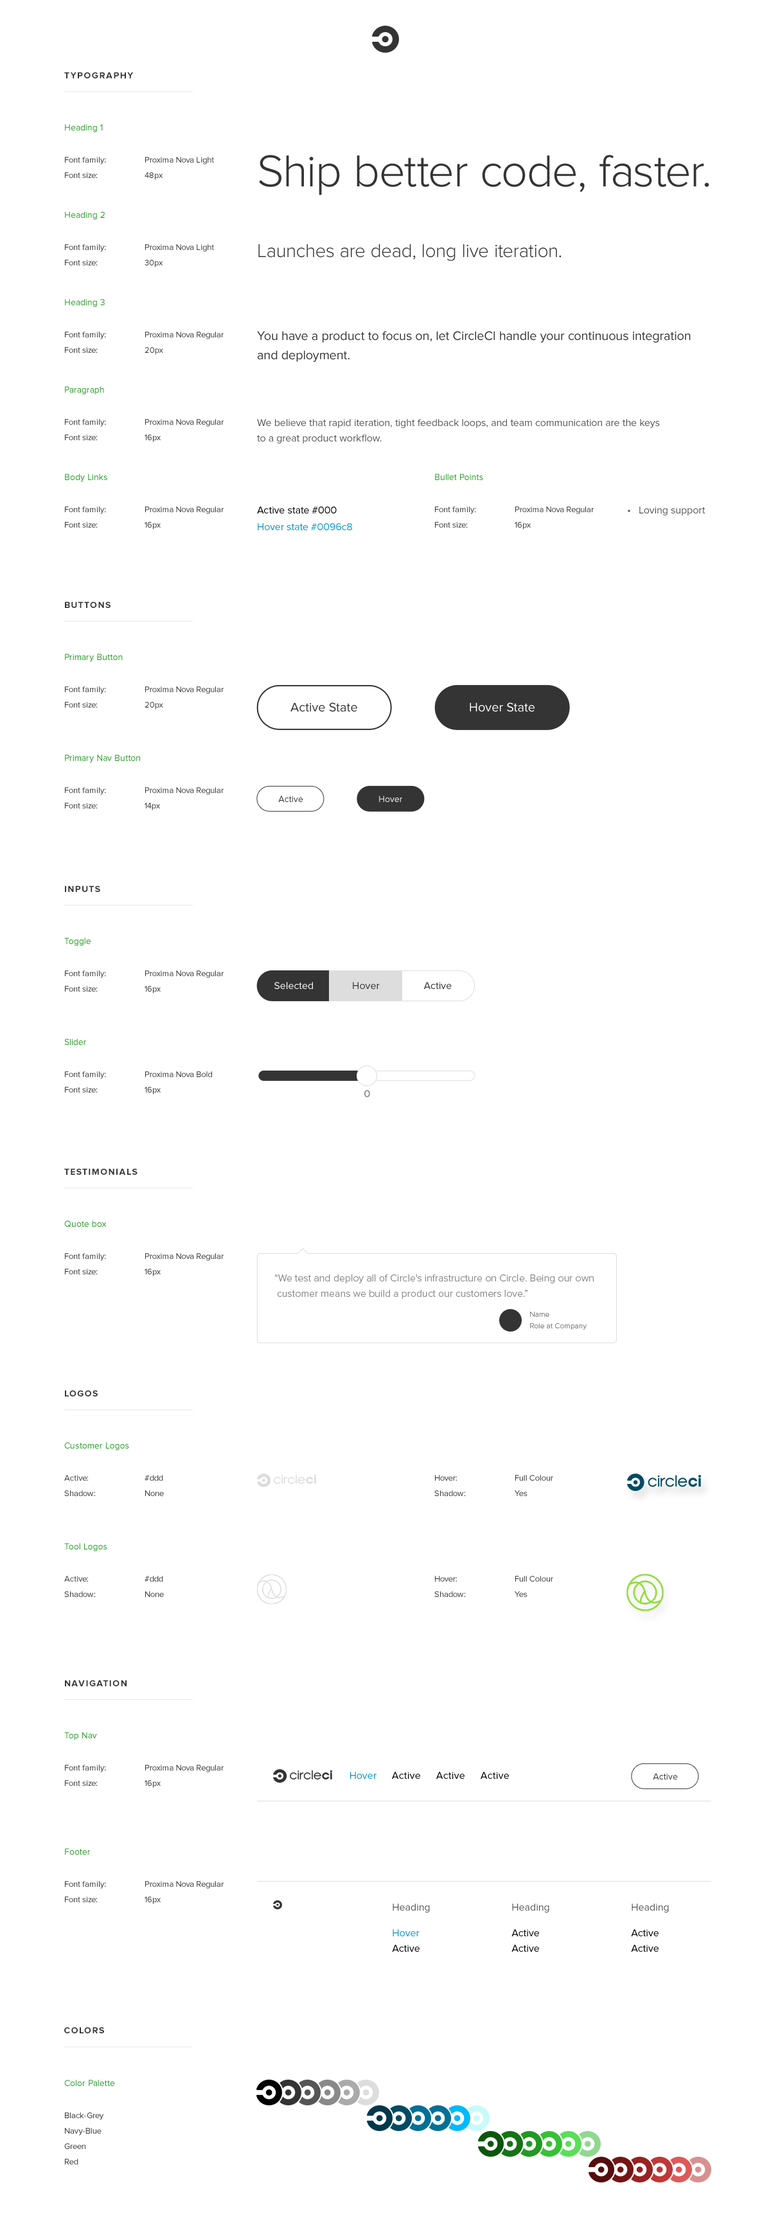
<style>
.page{position:relative;width:771px;height:2239px;background:#ffffff}
.page>*{position:absolute;margin:0}
.t1{font:9px "ProximaNova-Bold";letter-spacing:0.1em;color:#343434;text-transform:uppercase}
.t2{font:9px "ProximaNova-Regular";color:#229922}
.t3{font:8.4px/12.9px "ProximaNova-Regular";color:#343434}
.t4{font:8.4px/12.9px "ProximaNova-Regular";color:#333333}
.t5{font:46.3px "ProximaNova-Light";color:#343434}
.t6{font:19.3px "ProximaNova-Light";color:#343434}
.t7{font:12.9px/19.3px "ProximaNova-Regular";color:#343434}
.t8{font:10.3px/15.4px "ProximaNova-Regular";color:#555555}
.t9{font:10.3px/15.4px "ProximaNova-Regular";color:#0096c8}
.t10{font:10.3px/15.4px "ProximaNova-Regular";color:#000000}
.t11{font:10.3px "ProximaNova-Regular";color:#555555}
.t12{font:12.9px "ProximaNova-Regular";color:#343434}
.t13{font:12.9px "ProximaNova-Regular";color:#ffffff}
.t14{font:9px "ProximaNova-Regular";color:#343434}
.t15{font:9px "ProximaNova-Regular";color:#ffffff}
.t16{font:10.3px "ProximaNova-Regular";color:#ffffff}
.t17{font:10.3px "ProximaNova-Regular";color:#343434}
.t18{font:10.3px "ProximaNova-Regular";color:#898989;font-weight:bold}
.t19{font:10.3px/15.4px "ProximaNova-Light";color:#898989}
.t20{font:7.7px/11.6px "ProximaNova-Light";color:#898989}
.t21{font:10.3px "ProximaNova-Regular";color:#000000}
.t22{font:10.3px "ProximaNova-Regular";color:#0096c8}
.t23{font:10.3px/25.7px "ProximaNova-Regular";color:#0096c8}
.t24{font:10.3px/25.7px "ProximaNova-Regular";color:#000000}
</style>
<div class="page">
<p class="t1" style="left:64px;top:72px;width:70px;height:6px">Typography</p>
<p class="t2" style="left:65px;top:124px;width:38px;height:8px">Heading 1</p>
<p class="t3" style="left:65px;top:157px;width:41px;height:21px">Font family:<br>Font size:</p>
<p class="t4" style="left:145px;top:157px;width:69px;height:23px">Proxima Nova Light<br>48px</p>
<p class="t5" style="left:259px;top:155px;width:451px;height:40px">Ship better code, faster.</p>
<p class="t2" style="left:65px;top:211px;width:40px;height:9px">Heading 2</p>
<p class="t4" style="left:65px;top:244px;width:41px;height:21px">Font family:<br>Font size:</p>
<p class="t4" style="left:145px;top:244px;width:69px;height:23px">Proxima Nova Light<br>30px</p>
<p class="t6" style="left:258px;top:244px;width:304px;height:17px">Launches are dead, long live iteration.</p>
<p class="t2" style="left:65px;top:299px;width:40px;height:8px">Heading 3</p>
<p class="t4" style="left:65px;top:332px;width:41px;height:21px">Font family:<br>Font size:</p>
<p class="t4" style="left:145px;top:332px;width:79px;height:23px">Proxima Nova Regular<br>20px</p>
<p class="t7" style="left:257px;top:331px;width:434px;height:31px">You have a product to focus on, let CircleCI handle your continuous integration and deployment.</p>
<p class="t2" style="left:65px;top:386px;width:39px;height:9px">Paragraph</p>
<p class="t4" style="left:65px;top:419px;width:41px;height:21px">Font family:<br>Font size:</p>
<p class="t4" style="left:145px;top:419px;width:79px;height:23px">Proxima Nova Regular<br>16px</p>
<p class="t8" style="left:257px;top:419px;width:403px;height:25px">We believe that rapid iteration, tight feedback loops, and team communication are the keys to a great product workflow.</p>
<p class="t2" style="left:65px;top:474px;width:42px;height:8px">Body Links</p>
<p class="t2" style="left:435px;top:474px;width:48px;height:6px">Bullet Points</p>
<p class="t4" style="left:65px;top:506px;width:41px;height:22px">Font family:<br>Font size:</p>
<p class="t4" style="left:145px;top:506px;width:79px;height:24px">Proxima Nova Regular<br>16px</p>
<p class="t9" style="left:257px;top:506px;width:95px;height:24px"><span class="t10">Active state #000<br></span>Hover state #0096c8</p>
<p class="t4" style="left:435px;top:506px;width:41px;height:22px">Font family:<br>Font size:</p>
<p class="t4" style="left:515px;top:506px;width:79px;height:24px">Proxima Nova Regular<br>16px</p>
<p class="t11" style="left:628px;top:506px;width:78px;height:9px">• Loving support</p>
<p class="t1" style="left:65px;top:602px;width:46px;height:6px">Buttons</p>
<p class="t2" style="left:65px;top:654px;width:58px;height:8px">Primary Button</p>
<p class="t3" style="left:65px;top:686px;width:41px;height:22px">Font family:<br>Font size:</p>
<p class="t4" style="left:145px;top:686px;width:79px;height:24px">Proxima Nova Regular<br>20px</p>
<p class="t12" style="left:291px;top:703px;width:66px;height:9px">Active State</p>
<p class="t13" style="left:470px;top:703px;width:65px;height:9px">Hover State</p>
<p class="t2" style="left:65px;top:755px;width:75px;height:8px">Primary Nav Button</p>
<p class="t3" style="left:65px;top:787px;width:41px;height:22px">Font family:<br>Font size:</p>
<p class="t4" style="left:145px;top:787px;width:79px;height:24px">Proxima Nova Regular<br>14px</p>
<p class="t14" style="left:278px;top:796px;width:25px;height:6px">Active</p>
<p class="t15" style="left:379px;top:796px;width:23px;height:6px">Hover</p>
<p class="t1" style="left:65px;top:886px;width:35px;height:6px">Inputs</p>
<p class="t2" style="left:64px;top:938px;width:27px;height:8px">Toggle</p>
<p class="t3" style="left:65px;top:971px;width:41px;height:21px">Font family:<br>Font size:</p>
<p class="t4" style="left:145px;top:971px;width:79px;height:23px">Proxima Nova Regular<br>16px</p>
<p class="t16" style="left:274px;top:982px;width:39px;height:7px">Selected</p>
<p class="t17" style="left:353px;top:982px;width:27px;height:7px">Hover</p>
<p class="t17" style="left:424px;top:982px;width:28px;height:7px">Active</p>
<p class="t2" style="left:64px;top:1039px;width:22px;height:6px">Slider</p>
<p class="t3" style="left:65px;top:1071px;width:41px;height:22px">Font family:<br>Font size:</p>
<p class="t4" style="left:145px;top:1071px;width:67px;height:24px">Proxima Nova Bold<br>16px</p>
<p class="t18" style="left:364px;top:1090px;width:6px;height:8px">0</p>
<p class="t1" style="left:64px;top:1169px;width:74px;height:6px">Testimonials</p>
<p class="t2" style="left:64px;top:1221px;width:43px;height:7px">Quote box</p>
<p class="t3" style="left:65px;top:1253px;width:41px;height:22px">Font family:<br>Font size:</p>
<p class="t4" style="left:145px;top:1253px;width:79px;height:24px">Proxima Nova Regular<br>16px</p>
<p class="t19" style="left:275px;top:1275px;width:319px;height:24px">“We test and deploy all of Circle's infrastructure on Circle. Being our own<br> customer means we build a product our customers love.”</p>
<p class="t20" style="left:530px;top:1312px;width:57px;height:18px">Name<br>Role at Company</p>
<p class="t1" style="left:65px;top:1390px;width:33px;height:7px">Logos</p>
<p class="t2" style="left:64px;top:1442px;width:65px;height:9px">Customer Logos</p>
<p class="t3" style="left:64px;top:1475px;width:32px;height:21px">Active:<br>Shadow:</p>
<p class="t4" style="left:145px;top:1475px;width:19px;height:21px">#ddd<br>None</p>
<p class="t3" style="left:435px;top:1475px;width:31px;height:21px">Hover:<br>Shadow:</p>
<p class="t4" style="left:515px;top:1475px;width:38px;height:21px">Full Colour<br>Yes</p>
<p class="t2" style="left:64px;top:1543px;width:43px;height:9px">Tool Logos</p>
<p class="t3" style="left:64px;top:1576px;width:32px;height:21px">Active:<br>Shadow:</p>
<p class="t4" style="left:145px;top:1576px;width:19px;height:21px">#ddd<br>None</p>
<p class="t3" style="left:435px;top:1576px;width:31px;height:21px">Hover:<br>Shadow:</p>
<p class="t4" style="left:515px;top:1576px;width:38px;height:21px">Full Colour<br>Yes</p>
<p class="t1" style="left:65px;top:1680px;width:62px;height:7px">Navigation</p>
<p class="t2" style="left:64px;top:1732px;width:33px;height:9px">Top Nav</p>
<p class="t3" style="left:65px;top:1765px;width:41px;height:21px">Font family:<br>Font size:</p>
<p class="t4" style="left:145px;top:1765px;width:79px;height:23px">Proxima Nova Regular<br>16px</p>
<p class="t21" style="left:350px;top:1772px;width:159px;height:7px"><span class="t22">Hover</span>      Active      Active      Active</p>
<p class="t14" style="left:653px;top:1773px;width:25px;height:7px">Active</p>
<p class="t2" style="left:65px;top:1849px;width:25px;height:6px">Footer</p>
<p class="t3" style="left:65px;top:1881px;width:41px;height:22px">Font family:<br>Font size:</p>
<p class="t4" style="left:145px;top:1881px;width:79px;height:24px">Proxima Nova Regular<br>16px</p>
<p class="t11" style="left:392px;top:1904px;width:38px;height:48px">Heading<br><span class="t23">Hover<br></span><span class="t10">Active</span></p>
<p class="t11" style="left:512px;top:1904px;width:38px;height:48px">Heading<br><span class="t24">Active<br></span><span class="t10">Active</span></p>
<p class="t11" style="left:631px;top:1904px;width:38px;height:48px">Heading<br><span class="t24">Active<br></span><span class="t10">Active</span></p>
<p class="t1" style="left:64px;top:2027px;width:40px;height:7px">colors</p>
<p class="t2" style="left:64px;top:2080px;width:51px;height:6px">Color Palette</p>
<p class="t3" style="left:64px;top:2113px;width:39px;height:52px">Black-Grey<br>Navy-Blue<br>Green<br>Red</p>
</div>
